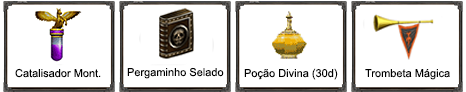
<style>
.page{position:relative;width:466px;height:92px;background:#ffffff}
.page>*{position:absolute;margin:0}
.t1{font:11px "ArialMT";color:#000000}
</style>
<div class="page">
<p class="t1" style="left:15px;top:68px;width:86px;height:10px">Catalisador Mont.</p>
<p class="t1" style="left:127px;top:67px;width:97px;height:12px">Pergaminho Selado</p>
<p class="t1" style="left:244px;top:68px;width:94px;height:12px">Poção Divina (30d)</p>
<p class="t1" style="left:365px;top:69px;width:85px;height:11px">Trombeta Mágica</p>
</div>
